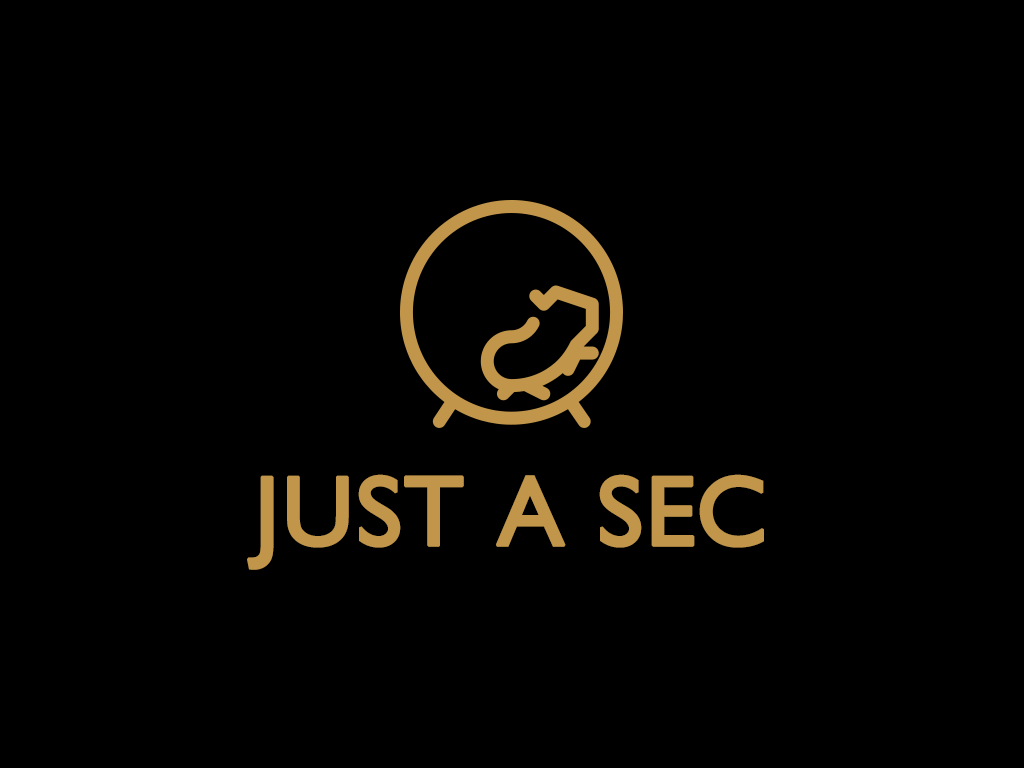
<style>
.page{position:relative;width:1024px;height:768px;background:#000000}
.page>*{position:absolute;margin:0}
.t1{font:100px "GillSans";color:#c1964a;font-weight:bold}
</style>
<div class="page">
<p class="t1" style="left:247px;top:474px;width:517px;height:96px">JUST A SEC</p>
</div>
